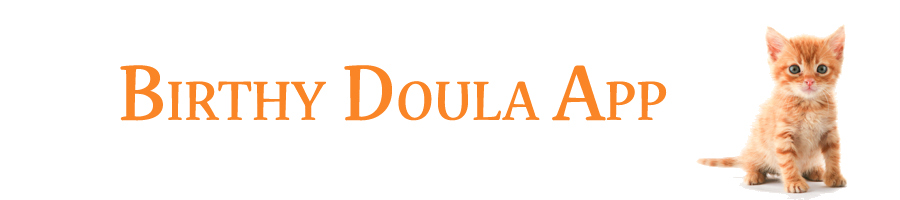
<style>
.page{position:relative;width:900px;height:200px;background:#ffffff}
.page>*{position:absolute;margin:0}
.t1{font:85px "NuevaStd-Regular";color:#fa8526;font-variant:small-caps;font-weight:bold}
</style>
<div class="page">
<p class="t1" style="left:120px;top:65px;width:547px;height:56px">Birthy Doula App</p>
</div>
